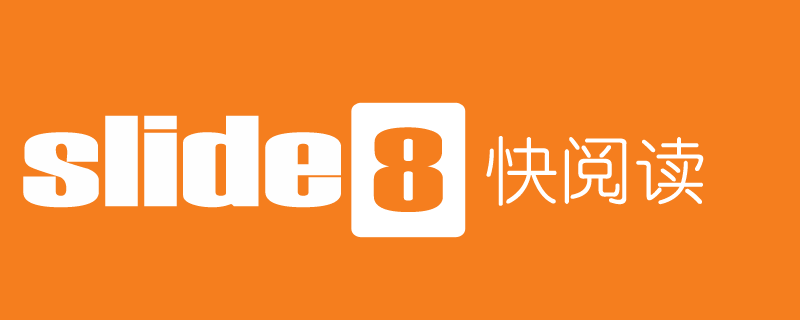
<style>
.page{position:relative;width:800px;height:320px;background:#f57e1e}
.page>*{position:absolute;margin:0}
.t1{font:129px "Haettenschweiler";color:#fefefe;scale:1.79 1}
.t2{font:118px "Haettenschweiler";color:#f57e1e;scale:1.68 1}
.t3{font:72px "YouYuan";color:#ffffff;font-weight:bold}
</style>
<div class="page">
<p class="t1" style="left:23px;top:115px;width:318px;height:93px">slide</p>
<p class="t2" style="left:373px;top:127px;width:70px;height:85px">8</p>
<p class="t3" style="left:486px;top:136px;width:218px;height:70px">快阅读</p>
</div>
